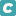
<style>
.page{position:relative;width:16px;height:16px;background:#3fa5ab}
.page>*{position:absolute;margin:0}
.t1{font:14px "Gotham-UltraItalic";color:#ffffff}
</style>
<div class="page">
<p class="t1" style="left:3px;top:3px;width:10px;height:10px">C</p>
</div>
